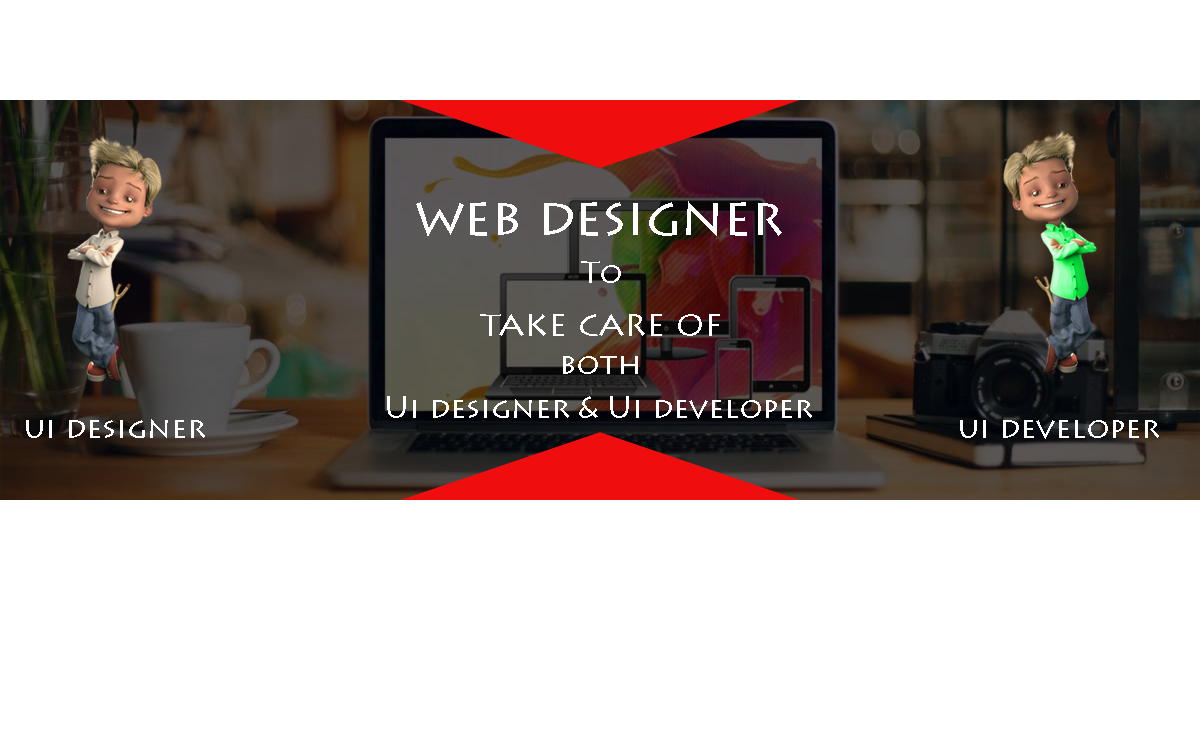
<style>
.page{position:relative;width:1200px;height:750px;background:#ffffff}
.page>*{position:absolute;margin:0}
.t1{font:53px "LithosPro-Regular";color:#fefefe}
.t2{font:30px "LithosPro-Regular";color:#fefefe}
.t3{font:36px "LithosPro-Regular";color:#ffffff}
.t4{font:30px "LithosPro-Regular";color:#ffffff}
.t5{font:30px "LithosPro-Regular";color:#fffefe}
</style>
<div class="page">
<p class="t1" style="left:416px;top:201px;width:366px;height:35px">web designer</p>
<p class="t2" style="left:581px;top:261px;width:40px;height:22px">To</p>
<p class="t3" style="left:480px;top:314px;width:240px;height:22px">take care of</p>
<p class="t4" style="left:563px;top:356px;width:75px;height:18px">both</p>
<p class="t4" style="left:387px;top:396px;width:425px;height:23px">Ui designer &amp; Ui developer</p>
<p class="t5" style="left:26px;top:419px;width:179px;height:19px">ui designer</p>
<p class="t5" style="left:960px;top:420px;width:199px;height:19px">ui developer</p>
</div>
